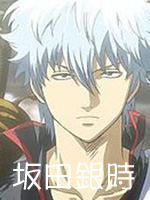
<style>
.page{position:relative;width:150px;height:200px}
.page>*{position:absolute;margin:0}
.t1{font:30px "DFPOP1-W5-WIN-BF";letter-spacing:0.04em;color:#ffffff}
</style>
<div class="page">
<p class="t1" style="left:12px;top:162px;width:123px;height:28px">坂田銀時</p>
</div>
